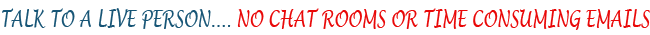
<style>
.page{position:relative;width:650px;height:35px;background:#ffffff}
.page>*{position:absolute;margin:0}
.t1{font:23.1px "LucidaHandwriting-Italic";color:#e90808;scale:0.69 1}
.t2{font:23.1px "LucidaHandwriting-Italic";color:#175576;scale:0.69 1}
</style>
<div class="page">
<p class="t1" style="left:2px;top:8px;width:648px;height:22px"><span class="t2">TALK TO A LIVE PERSON.... </span>NO CHAT ROOMS OR TIME CONSUMING EMAILS</p>
</div>
